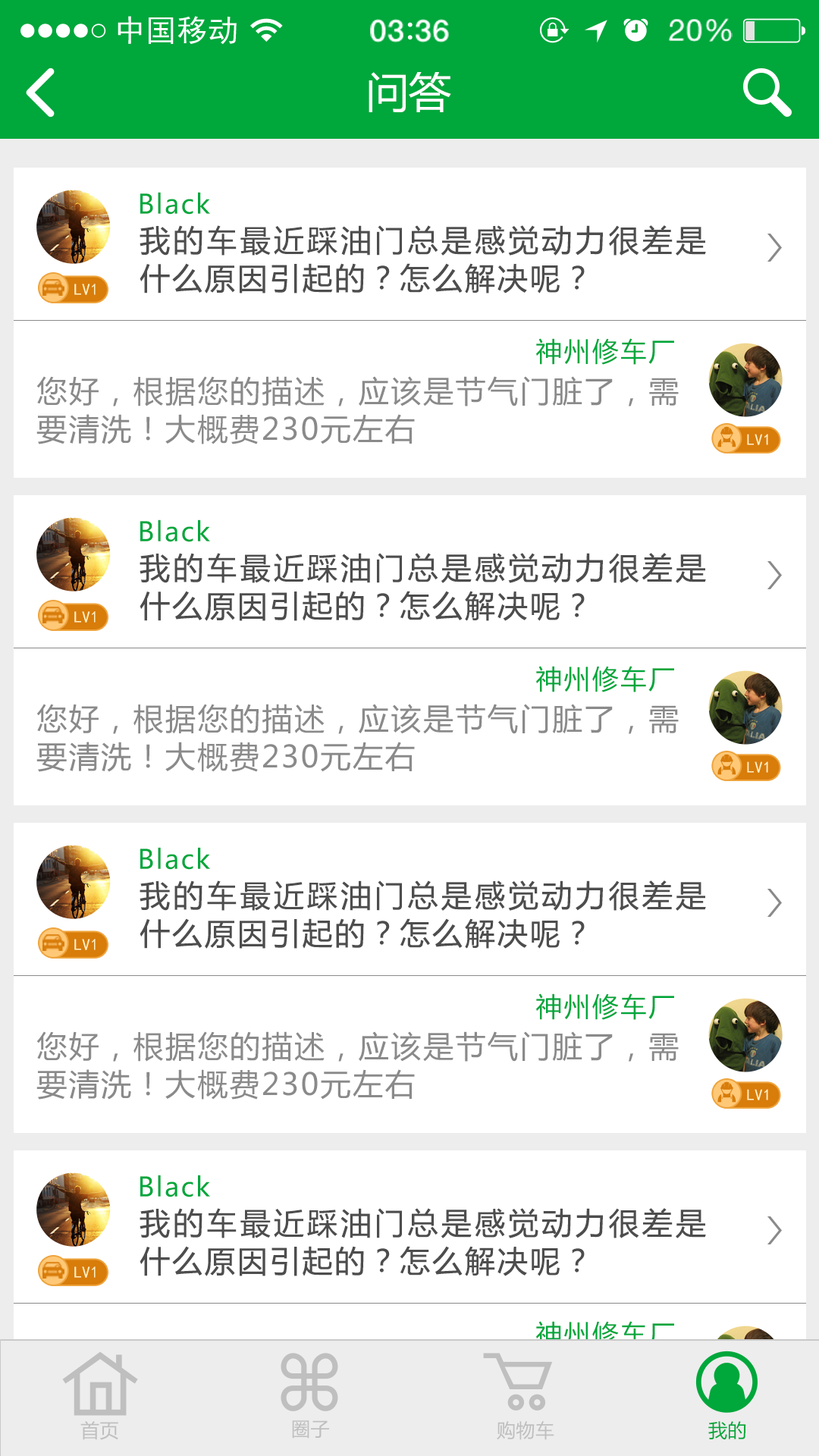
<style>
.page{position:relative;width:819px;height:1456px;background:#ffffff}
.page>*{position:absolute;margin:0}
.t1{font:41.7px "MicrosoftYaHei";letter-spacing:0.02em;color:#ffffff}
.t2{font:26.5px "MicrosoftYaHei";letter-spacing:0.06em;color:#00a73b}
.t3{font:30.3px/37.9px "MicrosoftYaHei";letter-spacing:0.06em;color:#4d4d4d}
.t4{font:16.2px "SimHei";letter-spacing:0.02em;color:#fff1bf}
.t5{font:30.3px/37.9px "MicrosoftYaHei";letter-spacing:0.06em;color:#8a8a8a}
.t6{font:15.8px "SimHei";letter-spacing:0.02em;color:#fff1bf}
.t7{font:18.9px "MicrosoftYaHei";letter-spacing:0.02em;color:#bfbfbf}
.t8{font:18.9px "MicrosoftYaHei";letter-spacing:0.02em;color:#00a73b}
</style>
<div class="page">
<p class="t1" style="left:369px;top:72px;width:82px;height:40px">问答</p>
<p class="t2" style="left:140px;top:192px;width:70px;height:23px">Black</p>
<p class="t3" style="left:140px;top:225px;width:566px;height:68px;text-align:justify">我的车最近踩油门总是感觉动力很差是什么原因引起的？怎么解决呢？</p>
<p class="t4" style="left:74px;top:284px;width:22px;height:11px">LV1</p>
<p class="t2" style="left:536px;top:338px;width:138px;height:27px">神州修车厂</p>
<p class="t5" style="left:36px;top:376px;width:643px;height:68px;text-align:justify">您好，根据您的描述，应该是节气门脏了，需要清洗！大概费230元左右</p>
<p class="t6" style="left:747px;top:434px;width:21px;height:11px">LV1</p>
<p class="t2" style="left:140px;top:519px;width:70px;height:23px">Black</p>
<p class="t3" style="left:140px;top:553px;width:566px;height:68px;text-align:justify">我的车最近踩油门总是感觉动力很差是什么原因引起的？怎么解决呢？</p>
<p class="t4" style="left:74px;top:611px;width:22px;height:12px">LV1</p>
<p class="t2" style="left:536px;top:666px;width:138px;height:26px">神州修车厂</p>
<p class="t5" style="left:36px;top:704px;width:643px;height:68px;text-align:justify">您好，根据您的描述，应该是节气门脏了，需要清洗！大概费230元左右</p>
<p class="t6" style="left:747px;top:761px;width:21px;height:12px">LV1</p>
<p class="t2" style="left:140px;top:847px;width:70px;height:23px">Black</p>
<p class="t3" style="left:140px;top:880px;width:566px;height:69px;text-align:justify">我的车最近踩油门总是感觉动力很差是什么原因引起的？怎么解决呢？</p>
<p class="t4" style="left:74px;top:939px;width:22px;height:11px">LV1</p>
<p class="t2" style="left:536px;top:993px;width:138px;height:27px">神州修车厂</p>
<p class="t5" style="left:36px;top:1031px;width:643px;height:69px;text-align:justify">您好，根据您的描述，应该是节气门脏了，需要清洗！大概费230元左右</p>
<p class="t6" style="left:747px;top:1089px;width:21px;height:11px">LV1</p>
<p class="t2" style="left:140px;top:1175px;width:70px;height:22px">Black</p>
<p class="t3" style="left:140px;top:1208px;width:566px;height:68px;text-align:justify">我的车最近踩油门总是感觉动力很差是什么原因引起的？怎么解决呢？</p>
<p class="t4" style="left:74px;top:1266px;width:22px;height:12px">LV1</p>
<p class="t2" style="left:536px;top:1321px;width:138px;height:27px">神州修车厂</p>
<p class="t7" style="left:80px;top:1421px;width:38px;height:19px">首页</p>
<p class="t7" style="left:292px;top:1420px;width:37px;height:19px">圈子</p>
<p class="t7" style="left:497px;top:1421px;width:57px;height:19px">购物车</p>
<p class="t8" style="left:708px;top:1421px;width:38px;height:19px">我的</p>
</div>
